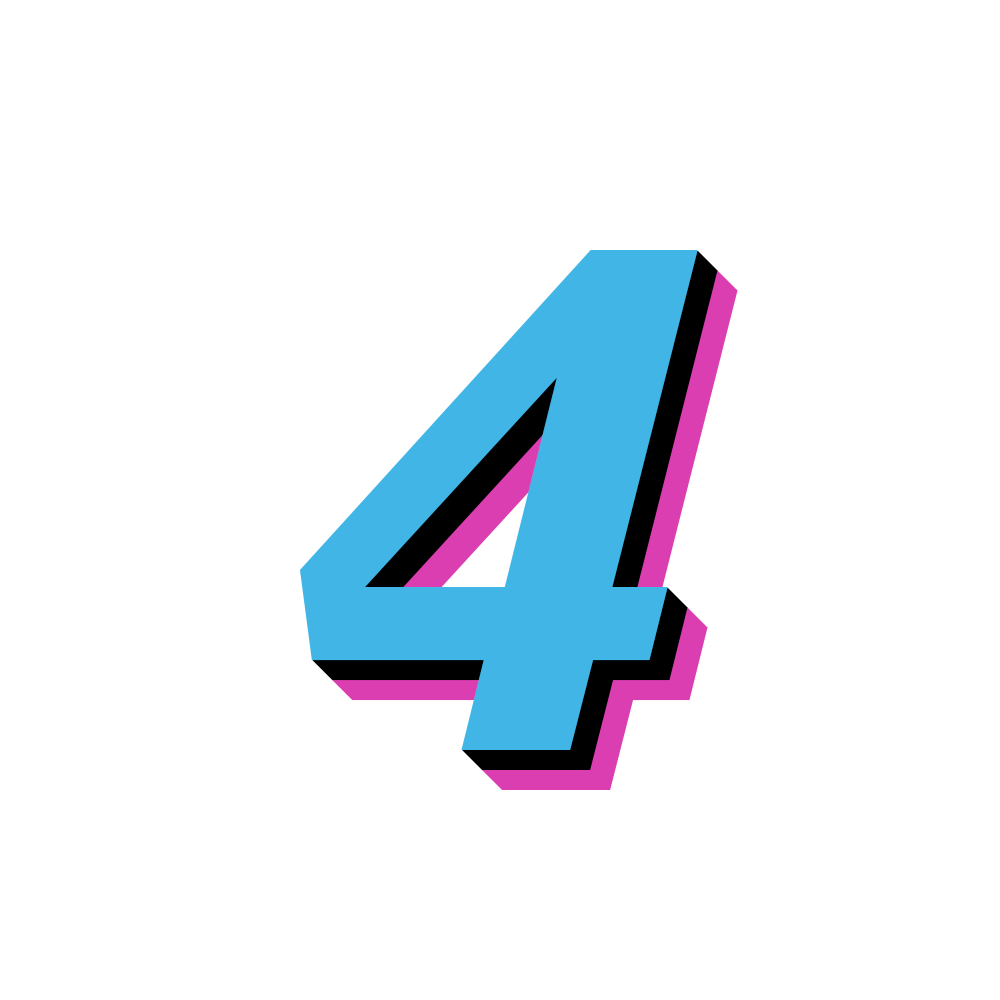
<style>
.page{position:relative;width:1000px;height:1000px;background:#ffffff}
.page>*{position:absolute;margin:0}
.t1{font:625px "NBAHeat";color:#41b6e6}
</style>
<div class="page">
<p class="t1" style="left:300px;top:250px;width:398px;height:500px">4</p>
</div>
